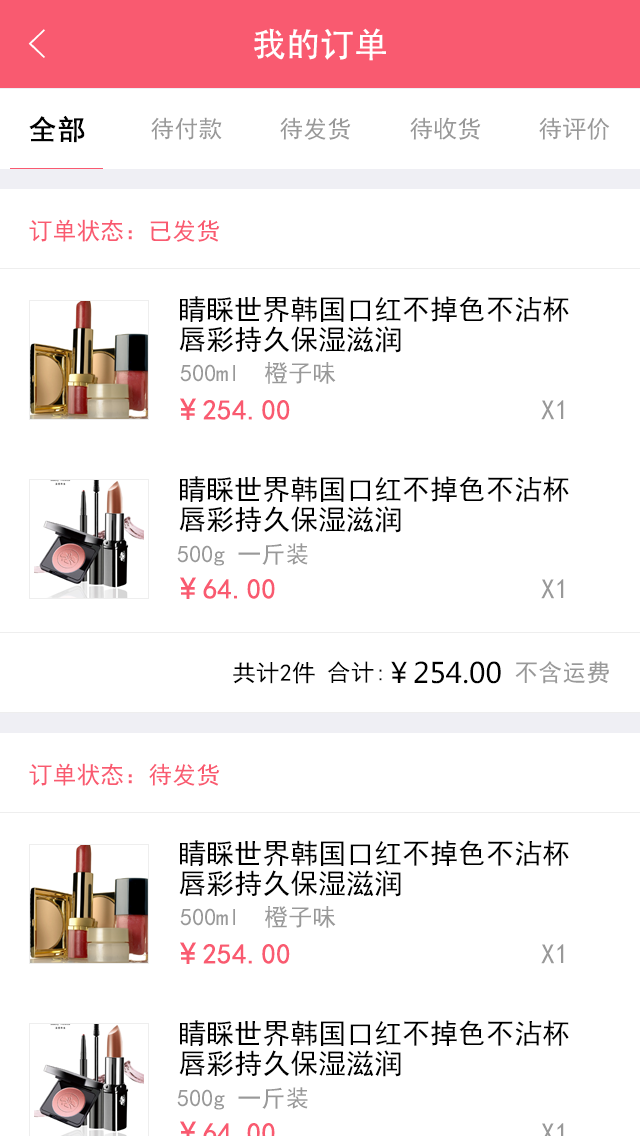
<style>
.page{position:relative;width:640px;height:1136px;background:#ffffff}
.page>*{position:absolute;margin:0}
.t1{font:40px "FZYXJW--GB1-0";color:#ffffff}
.t2{font:34px "AdobeHeitiStd-Regular";color:#ffffff}
.t3{font:28px "SimHei";color:#000000;font-weight:bold}
.t4{font:24px "SimHei";color:#999999}
.t5{font:24px "SimHei";color:#f95a70}
.t6{font:28px/30px "SimHei";color:#000000}
.t7{font:28px "SimHei";color:#f95a70;font-weight:bold}
.t8{font:28px "MicrosoftYaHei";color:#f95a70;font-weight:bold}
.t9{font:28px "SimHei";color:#999999}
.t10{font:24px "SimHei";color:#000000}
.t11{font:28px "MicrosoftYaHei";color:#000000}
</style>
<div class="page">
<p class="t1" style="left:28px;top:29px;width:17px;height:29px">&lt;</p>
<p class="t2" style="left:254px;top:28px;width:132px;height:33px">我的订单</p>
<p class="t3" style="left:29px;top:115px;width:56px;height:28px">全部</p>
<p class="t4" style="left:151px;top:117px;width:71px;height:23px">待付款</p>
<p class="t4" style="left:280px;top:117px;width:71px;height:23px">待发货</p>
<p class="t4" style="left:410px;top:117px;width:71px;height:23px">待收货</p>
<p class="t4" style="left:539px;top:117px;width:71px;height:23px">待评价</p>
<p class="t5" style="left:29px;top:219px;width:191px;height:23px">订单状态：已发货</p>
<p class="t6" style="left:179px;top:296px;width:390px;height:57px">睛睬世界韩国口红不掉色不沾杯<br>唇彩持久保湿滋润</p>
<p class="t4" style="left:180px;top:362px;width:156px;height:22px">500ml  橙子味</p>
<p class="t7" style="left:180px;top:398px;width:110px;height:22px"><span class="t8">￥</span>254.00</p>
<p class="t9" style="left:541px;top:400px;width:23px;height:20px">X1</p>
<p class="t6" style="left:179px;top:476px;width:390px;height:57px">睛睬世界韩国口红不掉色不沾杯<br>唇彩持久保湿滋润</p>
<p class="t4" style="left:177px;top:543px;width:131px;height:23px">500g 一斤装</p>
<p class="t7" style="left:180px;top:577px;width:95px;height:22px"><span class="t8">￥</span>64.00</p>
<p class="t9" style="left:541px;top:579px;width:23px;height:20px">X1</p>
<p class="t10" style="left:233px;top:661px;width:82px;height:23px">共计2件</p>
<p class="t10" style="left:327px;top:661px;width:55px;height:22px">合计:</p>
<p class="t11" style="left:391px;top:661px;width:110px;height:23px">￥254.00</p>
<p class="t4" style="left:515px;top:661px;width:94px;height:23px">不含运费</p>
<p class="t5" style="left:29px;top:763px;width:191px;height:23px">订单状态：待发货</p>
<p class="t6" style="left:179px;top:840px;width:390px;height:57px">睛睬世界韩国口红不掉色不沾杯<br>唇彩持久保湿滋润</p>
<p class="t4" style="left:180px;top:906px;width:156px;height:22px">500ml  橙子味</p>
<p class="t7" style="left:180px;top:942px;width:110px;height:22px"><span class="t8">￥</span>254.00</p>
<p class="t9" style="left:541px;top:944px;width:23px;height:20px">X1</p>
<p class="t6" style="left:179px;top:1020px;width:390px;height:57px">睛睬世界韩国口红不掉色不沾杯<br>唇彩持久保湿滋润</p>
<p class="t4" style="left:177px;top:1087px;width:131px;height:23px">500g 一斤装</p>
</div>
